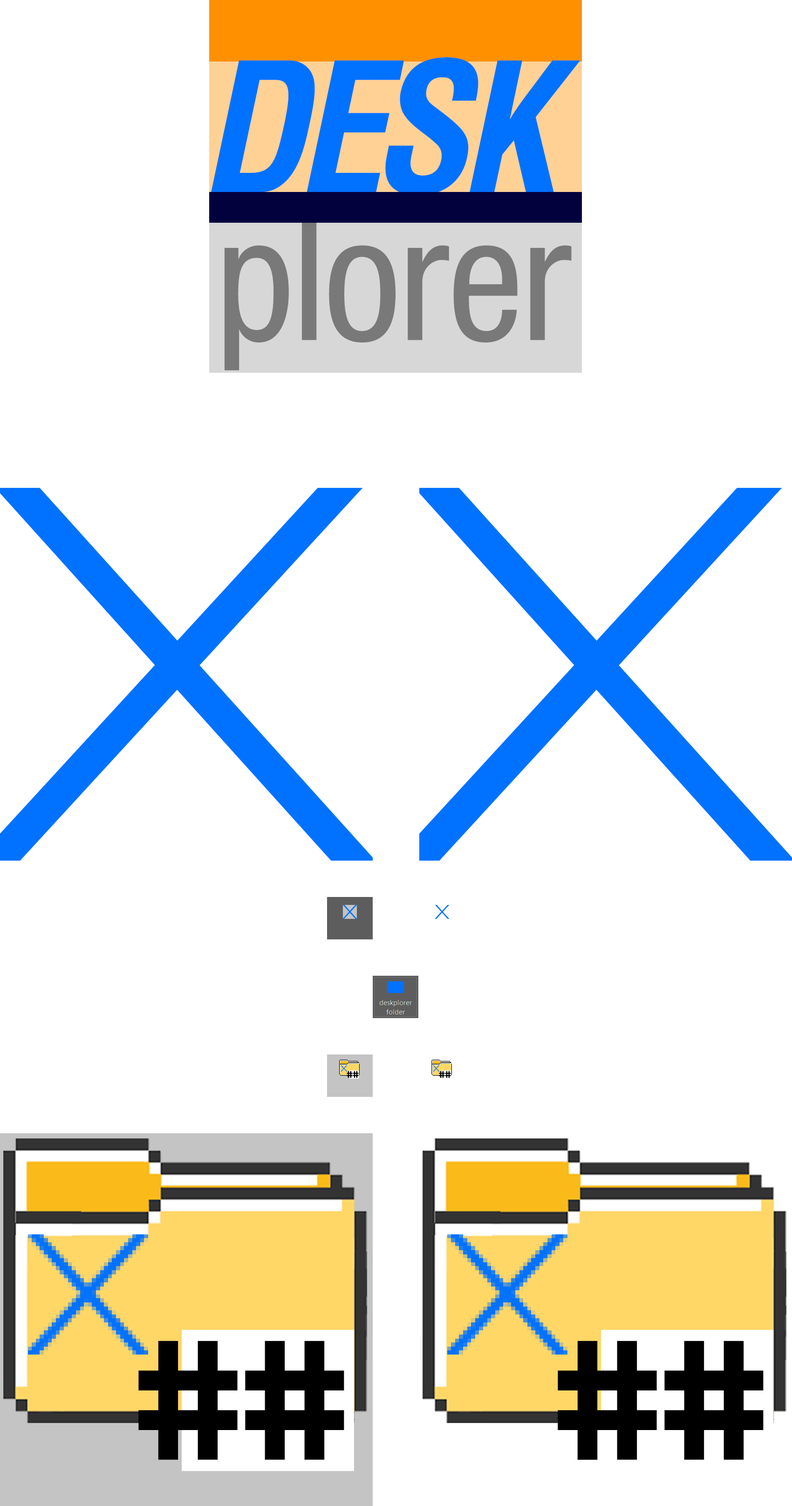
<style>
.page{position:relative;width:792px;height:1506px;background:#ffffff}
.page>*{position:absolute;margin:0}
.t1{font:175.5px "HelveticaLTStd-BoldCondObl";letter-spacing:-0.05em;color:#0072ff}
.t2{font:171.8px "HelveticaNeueLTStd-Cn";letter-spacing:0.01em;color:#797979}
.t3{font:9px "Minecraft";color:#000000}
.t4{font:158.2px "Minecraft";color:#000000}
</style>
<div class="page">
<p class="t1" style="left:211px;top:57px;width:369px;height:139px">DESK</p>
<p class="t2" style="left:225px;top:217px;width:347px;height:153px">plorer</p>
<p class="t3" style="left:347px;top:1071px;width:12px;height:7px">##</p>
<p class="t3" style="left:439px;top:1071px;width:12px;height:7px">##</p>
<p class="t4" style="left:138px;top:1340px;width:206px;height:120px">##</p>
<p class="t4" style="left:558px;top:1340px;width:206px;height:120px">##</p>
</div>
